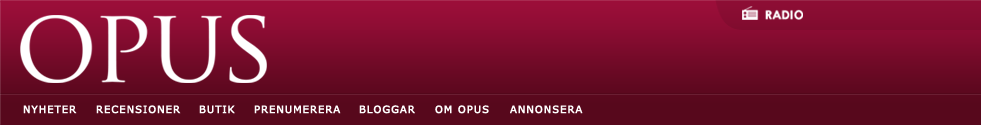
<style>
.page{position:relative;width:981px;height:125px}
.page>*{position:absolute;margin:0}
.t1{font:10px "Verdana";letter-spacing:0.075em;color:#ffffff;text-transform:uppercase;font-weight:bold}
</style>
<div class="page">
<p class="t1" style="left:23px;top:105px;width:54px;height:9px">Nyheter</p>
<p class="t1" style="left:96px;top:105px;width:85px;height:9px">Recensioner</p>
<p class="t1" style="left:199px;top:105px;width:36px;height:9px">butik</p>
<p class="t1" style="left:254px;top:105px;width:87px;height:9px">Prenumerera</p>
<p class="t1" style="left:359px;top:105px;width:56px;height:9px">Bloggar</p>
<p class="t1" style="left:435px;top:105px;width:54px;height:9px">Om OPUS</p>
<p class="t1" style="left:510px;top:105px;width:73px;height:9px">Annonsera</p>
</div>
